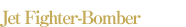
<style>
.page{position:relative;width:186px;height:27px;background:#ffffff}
.page>*{position:absolute;margin:0}
.t1{font:18px "RyuminPro-ExBold";letter-spacing:-0.08em;color:#c4a956}
</style>
<div class="page">
<p class="t1" style="left:0px;top:10px;width:141px;height:17px">Jet Fighter-Bomber</p>
</div>
